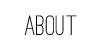
<style>
.page{position:relative;width:100px;height:50px;background:#ffffff}
.page>*{position:absolute;margin:0}
.t1{font:29px "OstrichSans-Medium";color:#000000}
</style>
<div class="page">
<p class="t1" style="left:24px;top:15px;width:53px;height:20px">about</p>
</div>
